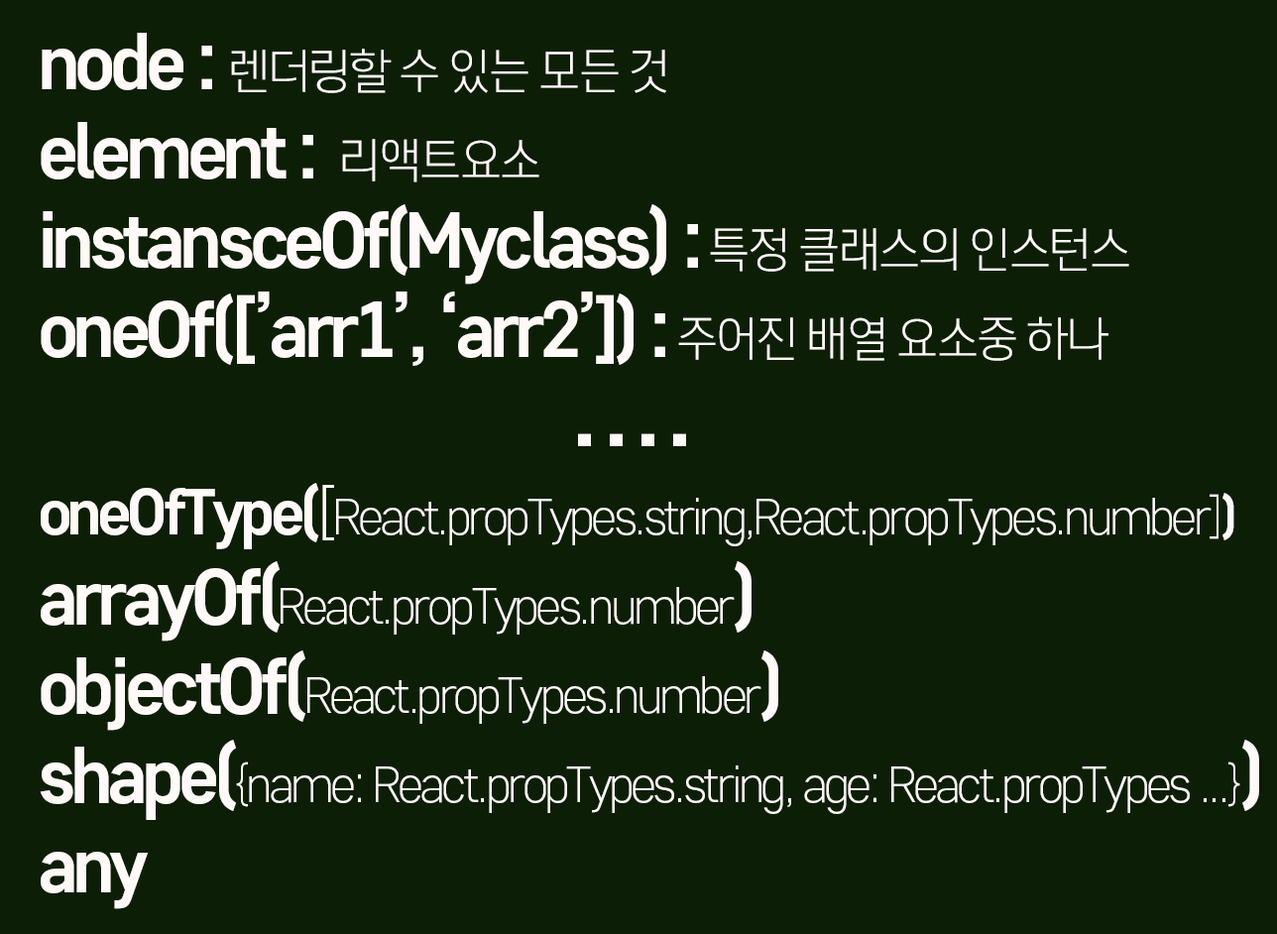
<style>
.page{position:relative;width:1277px;height:934px;background:#0d1e06}
.page>*{position:absolute;margin:0}
.t1{font:47.6px/89.2px "CoreGothicD-3Light";letter-spacing:-0.075em;color:#fffaf8}
.t2{font:71.4px/89.2px "CoreGothicD-7ExtraBold";letter-spacing:-0.075em;color:#fffaf8}
.t3{font:71.4px/89.2px "CoreGothicD-9Black";letter-spacing:-0.075em;color:#fffaf8}
.t4{font:59.5px/89.2px "CoreGothicD-7ExtraBold";letter-spacing:-0.075em;color:#fffaf8}
.t5{font:59.5px/89.2px "CoreGothicD-3Light";letter-spacing:-0.075em;color:#fffaf8}
.t6{font:47.6px/89.2px "CoreGothicD-7ExtraBold";letter-spacing:-0.075em;color:#fffaf8}
</style>
<div class="page">
<p class="t1" style="left:40px;top:33px;width:1219px;height:876px"><span class="t2">node : </span>렌더링할 수 있는 모든 것<br><span class="t2">element : </span> 리액트요소<br><span class="t2">instansceOf(Myclass) :</span> 특정 클래스의 인스턴스<br><span class="t2">oneOf([’arr1’, ‘arr2’]) :</span> 주어진 배열 요소중 하나<br><span class="t3">               . . . .<br></span><span class="t4">oneOfType(</span><span class="t5">[</span>React.propTypes.string,React.propTypes.number]<span class="t6">)<br></span><span class="t2">arrayOf(</span>React.propTypes.number<span class="t2">)<br>objectOf(</span>React.propTypes.number<span class="t2">)<br>shape(</span>{name: React.propTypes.string, age: React.propTypes ...}<span class="t2">)<br>any</span></p>
</div>
